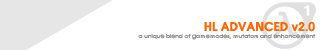
<style>
.page{position:relative;width:320px;height:50px;background:#ffffff}
.page>*{position:absolute;margin:0}
.t1{font:12px "Atlanta-Demi";color:#ff6600}
.t2{font:6px "Atlanta-Book";color:#909090}
</style>
<div class="page">
<p class="t1" style="left:204px;top:21px;width:111px;height:11px">HL ADVANCED v2.0</p>
<p class="t2" style="left:138px;top:34px;width:178px;height:6px">a unique blend of gamemodes, mutators and enhancement</p>
</div>
